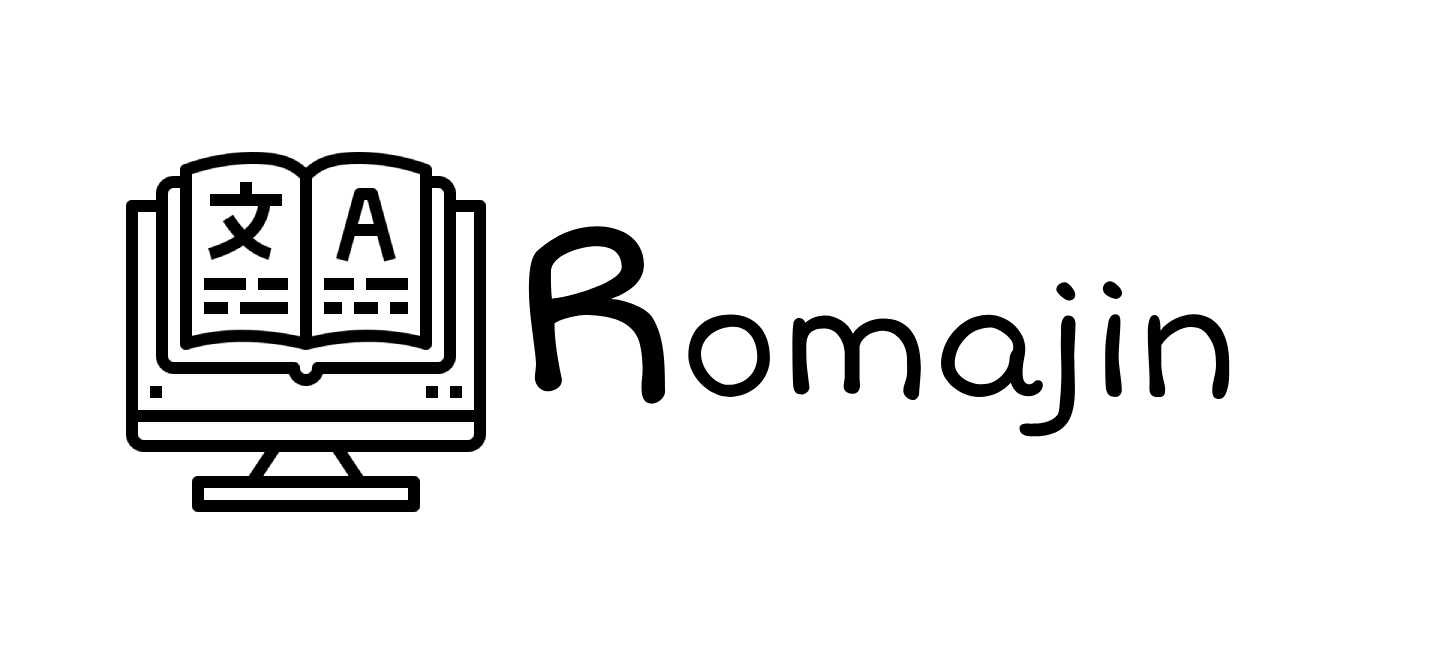
<style>
.page{position:relative;width:1451px;height:664px;background:#ffffff}
.page>*{position:absolute;margin:0}
.t1{font:150px "ShortStack";color:#000000}
.t2{font:250px "ShortStack";color:#ffffff}
</style>
<div class="page">
<p class="t1" style="left:528px;top:226px;width:702px;height:211px"><span class="t2">R</span>omajin</p>
</div>
